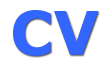
<style>
.page{position:relative;width:110px;height:67px;background:#ffffff}
.page>*{position:absolute;margin:0}
.t1{font:60px "Verdana-Bold";color:#3366ff}
</style>
<div class="page">
<p class="t1" style="left:13px;top:10px;width:86px;height:46px">CV</p>
</div>
